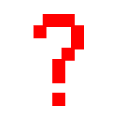
<style>
.page{position:relative;width:120px;height:120px;background:#ffffff}
.page>*{position:absolute;margin:0}
.t1{font:120px "Small Fonts";color:#ff0000;font-weight:bold}
</style>
<div class="page">
<p class="t1" style="left:33px;top:14px;width:51px;height:92px">?</p>
</div>
